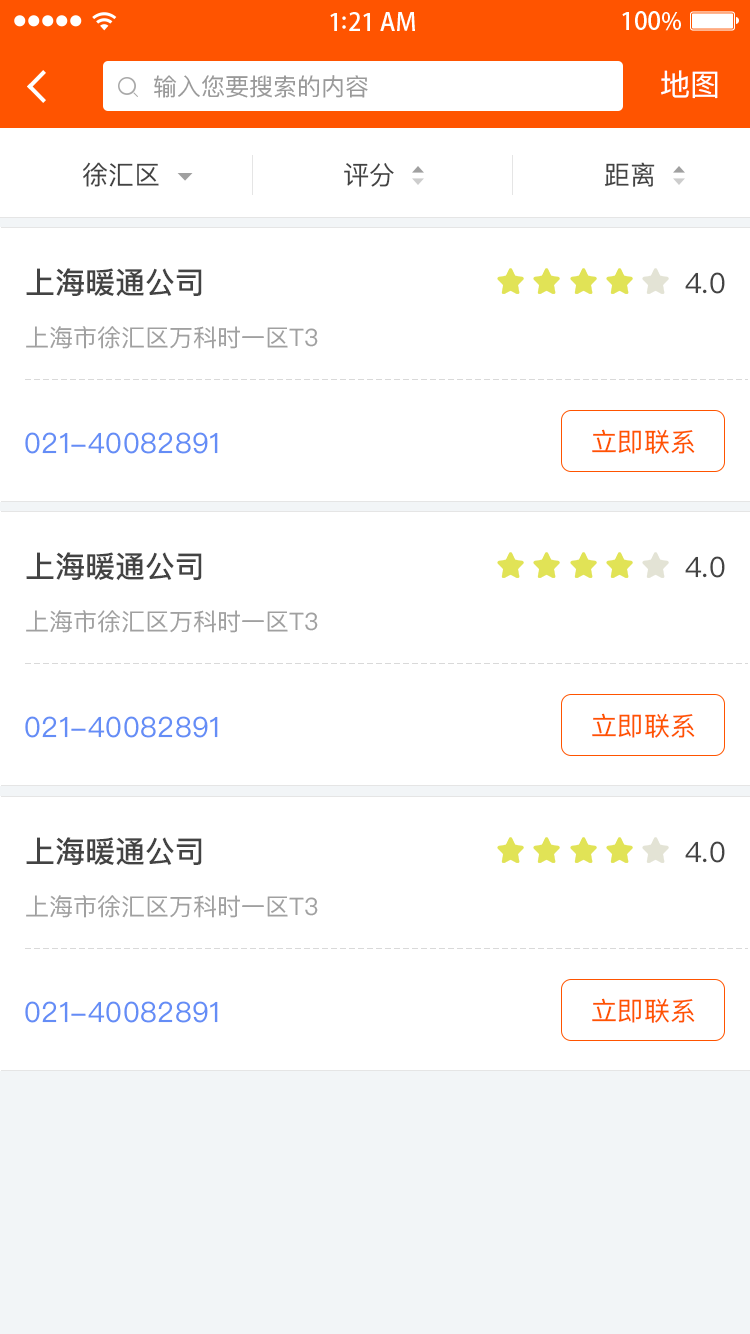
<style>
.page{position:relative;width:750px;height:1334px;background:#ffffff}
.page>*{position:absolute;margin:0}
.t1{font:24px "PingFangSC-Regular";color:#999999}
.t2{font:30px "PingFangSC-Regular";color:#ffffff}
.t3{font:26px "PingFangSC-Regular";color:#434343}
.t4{font:30px "PingFangSC-Medium";color:#434343}
.t5{font:28px "PingFangSC-Regular";color:#434343}
.t6{font:24px "PingFangSC-Regular";color:#a0a0a0}
.t7{font:28px "PingFangSC-Regular";letter-spacing:0.02em;color:#648df6}
.t8{font:26px "PingFangSC-Regular";letter-spacing:0.02em;color:#ff5400}
</style>
<div class="page">
<p class="t1" style="left:154px;top:75px;width:214px;height:23px">输入您要搜索的内容</p>
<p class="t2" style="left:661px;top:70px;width:57px;height:29px">地图</p>
<p class="t3" style="left:83px;top:162px;width:76px;height:25px">徐汇区</p>
<p class="t3" style="left:344px;top:163px;width:50px;height:24px">评分</p>
<p class="t3" style="left:604px;top:162px;width:51px;height:25px">距离</p>
<p class="t4" style="left:26px;top:268px;width:176px;height:29px">上海暖通公司</p>
<p class="t5" style="left:685px;top:272px;width:40px;height:22px">4.0</p>
<p class="t6" style="left:26px;top:326px;width:292px;height:23px">上海市徐汇区万科时一区T3</p>
<p class="t7" style="left:25px;top:432px;width:193px;height:22px">021-40082891</p>
<p class="t8" style="left:592px;top:429px;width:103px;height:25px">立即联系</p>
<p class="t4" style="left:26px;top:552px;width:176px;height:29px">上海暖通公司</p>
<p class="t5" style="left:685px;top:556px;width:40px;height:22px">4.0</p>
<p class="t6" style="left:26px;top:610px;width:292px;height:23px">上海市徐汇区万科时一区T3</p>
<p class="t8" style="left:592px;top:713px;width:103px;height:25px">立即联系</p>
<p class="t7" style="left:25px;top:716px;width:193px;height:22px">021-40082891</p>
<p class="t4" style="left:26px;top:837px;width:176px;height:29px">上海暖通公司</p>
<p class="t5" style="left:685px;top:841px;width:40px;height:22px">4.0</p>
<p class="t6" style="left:26px;top:895px;width:292px;height:23px">上海市徐汇区万科时一区T3</p>
<p class="t7" style="left:25px;top:1001px;width:193px;height:22px">021-40082891</p>
<p class="t8" style="left:592px;top:998px;width:103px;height:25px">立即联系</p>
</div>
